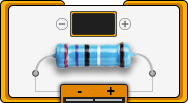
<style>
.page{position:relative;width:188px;height:103px;background:#f5f5f5}
.page>*{position:absolute;margin:0}
.t1{font:18px "Candara-Bold";letter-spacing:0.2em;color:#000000;text-transform:uppercase}
</style>
<div class="page">
<p class="t1" style="left:107px;top:87px;width:8px;height:8px">+</p>
<p class="t1" style="left:77px;top:91px;width:5px;height:2px">-</p>
</div>
